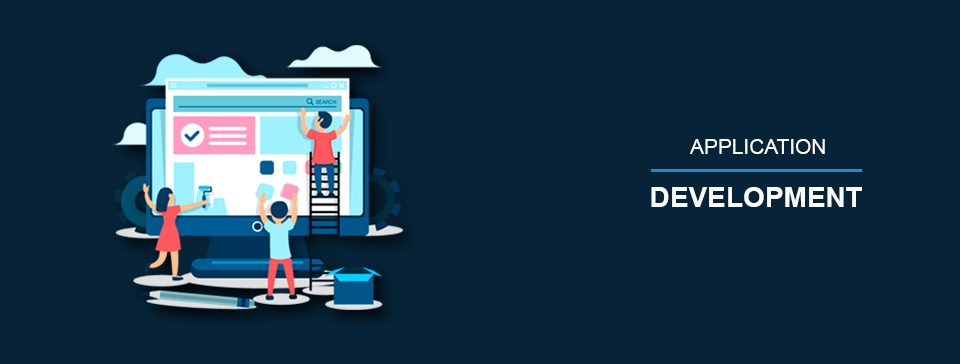
<style>
.page{position:relative;width:960px;height:364px;background:#062337}
.page>*{position:absolute;margin:0}
.t1{font:20.8px "ArialMT";color:#ffffff}
.t2{font:28px "Arial-BoldMT";color:#fefefe}
</style>
<div class="page">
<p class="t1" style="left:690px;top:139px;width:135px;height:15px">APPLICATION</p>
<p class="t2" style="left:651px;top:187px;width:211px;height:20px">DEVELOPMENT</p>
</div>
